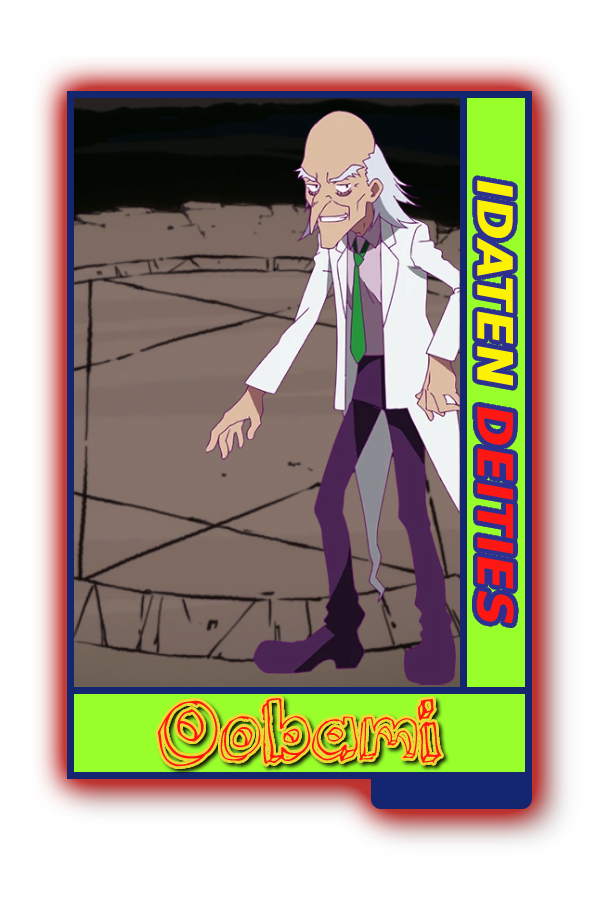
<style>
.page{position:relative;width:600px;height:900px;background:#ffffff}
.page>*{position:absolute;margin:0}
.t1{font:48.8px "MADETOMMY-Bold";color:#ff1713;font-weight:bold;font-style:italic}
.t2{font:48.8px "MADETOMMY-Bold";color:#fdf103;font-weight:bold;font-style:italic}
.t3{font:75px "3dumb";color:#ff1611}
</style>
<div class="page">
<p class="t1" style="left:476px;top:180px;width:38px;height:444px;rotate:90deg"><span class="t2">IDATEN </span>DEITIES</p>
<p class="t3" style="left:157px;top:698px;width:285px;height:69px">Oobami</p>
</div>
